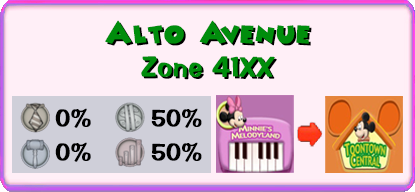
<style>
.page{position:relative;width:415px;height:192px;background:#ffeff7}
.page>*{position:absolute;margin:0}
.t1{font:28px "Minnie";color:#008d0c;font-weight:bold}
.t2{font:28px "Minnie";font-weight:bold}
.t3{font:28px "ImpressBT-Regular";color:#008d0c;font-weight:bold}
.t4{font:28px "ImpressBT-Regular";font-weight:bold}
.t5{font:23.6px "ImpressBT-Regular";color:#000000;font-weight:bold}
</style>
<div class="page">
<p class="t1" style="left:105px;top:20px;width:205px;height:24px">Alto Avenue</p>
<p class="t2" style="left:107px;top:22px;width:205px;height:24px">Alto Avenue</p>
<p class="t3" style="left:141px;top:56px;width:134px;height:22px">Zone 41XX</p>
<p class="t4" style="left:143px;top:58px;width:134px;height:22px">Zone 41XX</p>
<p class="t5" style="left:55px;top:108px;width:36px;height:20px">0%</p>
<p class="t5" style="left:151px;top:108px;width:51px;height:20px">50%</p>
<p class="t5" style="left:55px;top:142px;width:36px;height:20px">0%</p>
<p class="t5" style="left:151px;top:142px;width:51px;height:20px">50%</p>
</div>
